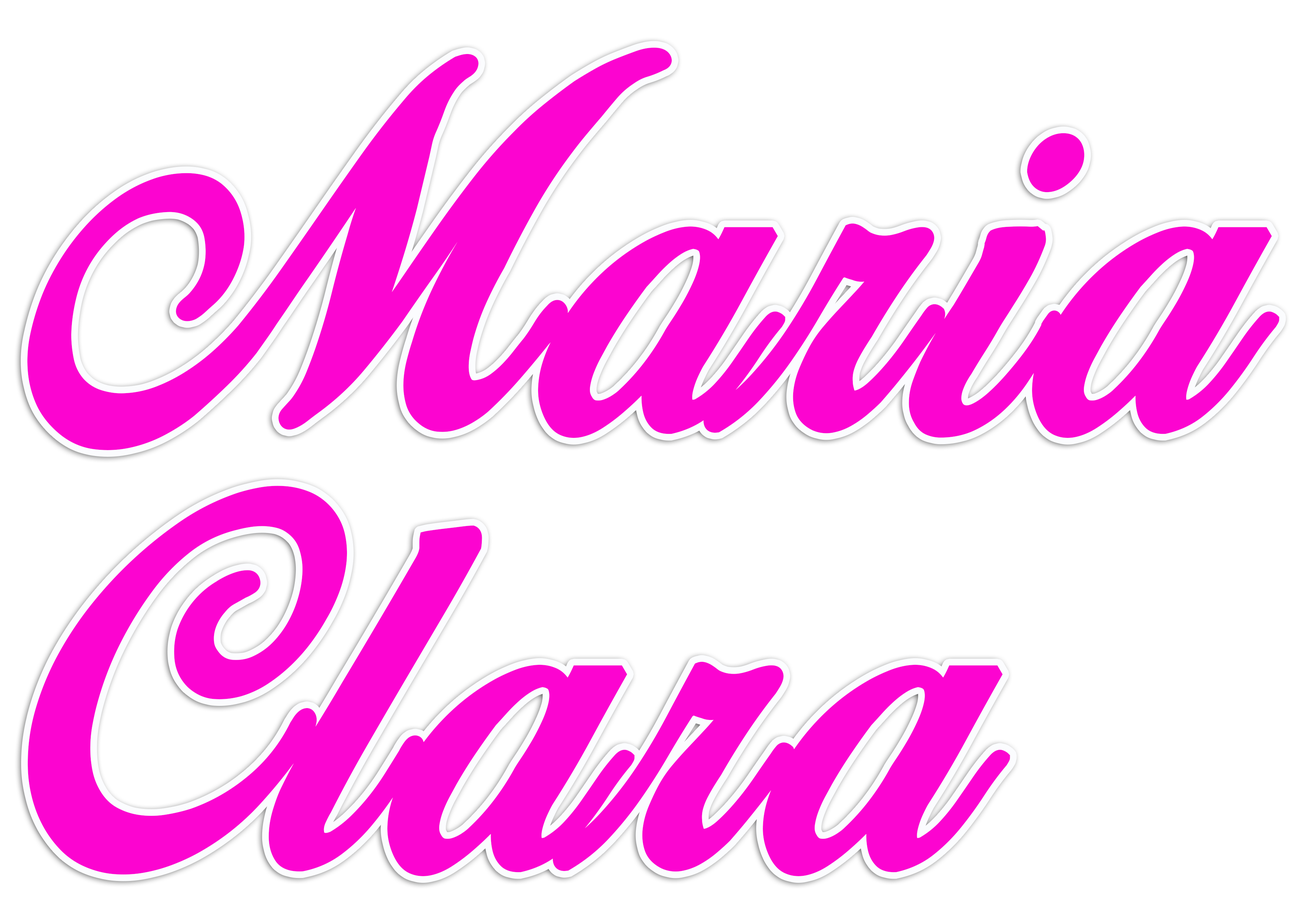
<style>
.page{position:relative;width:1299px;height:918px;background:#ffffff}
.page>*{position:absolute;margin:0}
.t1{font:442.7px/438.1px "BirdsofParadise-PersonaluseOnly";letter-spacing:0.04em;color:#fc04d0;font-weight:bold}
</style>
<div class="page">
<p class="t1" style="left:27px;top:47px;width:1252px;height:829px">Maria<br>Clara</p>
</div>
